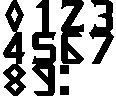
<style>
.page{position:relative;width:116px;height:96px;background:#ffffff}
.page>*{position:absolute;margin:0}
.t1{font:41px "Thunderbolt-Regular";letter-spacing:0.05em;color:#000000;font-weight:bold}
</style>
<div class="page">
<p class="t1" style="left:5px;top:0px;width:19px;height:32px">0</p>
<p class="t1" style="left:36px;top:0px;width:13px;height:32px">1</p>
<p class="t1" style="left:61px;top:0px;width:23px;height:32px">2</p>
<p class="t1" style="left:91px;top:0px;width:22px;height:32px">3</p>
<p class="t1" style="left:3px;top:32px;width:22px;height:32px">4</p>
<p class="t1" style="left:32px;top:32px;width:24px;height:32px">5</p>
<p class="t1" style="left:61px;top:32px;width:23px;height:32px">6</p>
<p class="t1" style="left:89px;top:32px;width:25px;height:32px">7</p>
<p class="t1" style="left:3px;top:64px;width:23px;height:32px">8</p>
<p class="t1" style="left:32px;top:64px;width:23px;height:32px">9</p>
<p class="t1" style="left:60px;top:65px;width:9px;height:30px">:</p>
</div>
